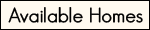
<style>
.page{position:relative;width:150px;height:30px;background:#fffaf0}
.page>*{position:absolute;margin:0}
.t1{font:20px "GeosansLight";color:#000000;font-weight:bold}
</style>
<div class="page">
<p class="t1" style="left:8px;top:7px;width:135px;height:16px">Available Homes</p>
</div>
